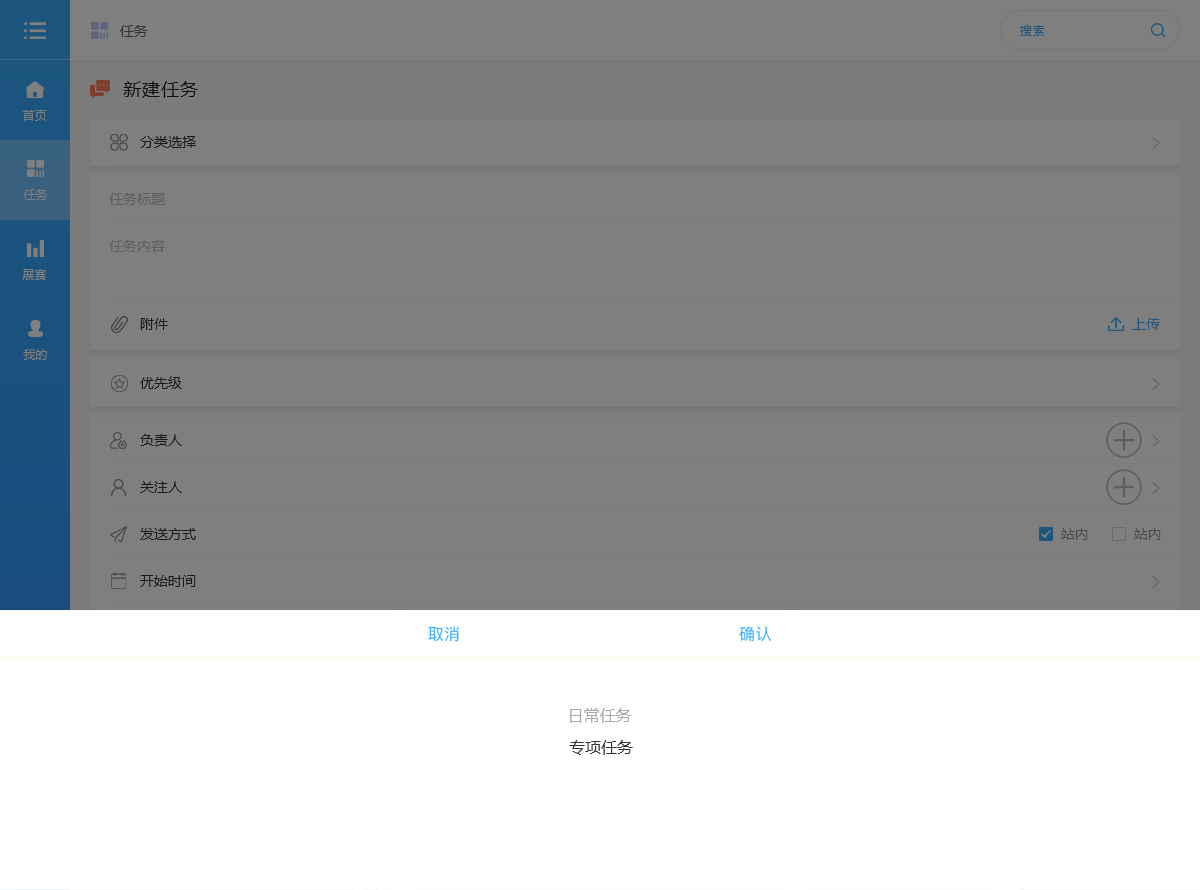
<style>
.page{position:relative;width:1200px;height:890px;background:#7f7f7f}
.page>*{position:absolute;margin:0}
.t1{font:14px "MicrosoftYaHei";color:#333333}
.t2{font:12px "MicrosoftYaHei";letter-spacing:0.05em;color:#1c567f}
.t3{font:18px "MicrosoftYaHei";letter-spacing:0.05em;color:#222222}
.t4{font:12px "MicrosoftYaHei";color:#7f7f7f}
.t5{font:14px "MicrosoftYaHei";color:#191919}
.t6{font:14px "MicrosoftYaHei";color:#5f5f5f}
.t7{font:14px "MicrosoftYaHei";color:#1c567f}
.t8{font:14px "MicrosoftYaHei";color:#4c4c4c}
.t9{font:16px "MicrosoftYaHei";color:#a8a8a8}
.t10{font:16px "MicrosoftYaHei";color:#333333}
</style>
<div class="page">
<p class="t1" style="left:120px;top:25px;width:28px;height:12px">任务</p>
<p class="t2" style="left:1020px;top:25px;width:25px;height:11px">搜索</p>
<p class="t3" style="left:123px;top:81px;width:75px;height:17px">新建任务</p>
<p class="t4" style="left:23px;top:110px;width:24px;height:11px">首页</p>
<p class="t5" style="left:140px;top:136px;width:56px;height:12px">分类选择</p>
<p class="t4" style="left:23px;top:189px;width:24px;height:11px">任务</p>
<p class="t6" style="left:109px;top:193px;width:56px;height:12px">任务标题</p>
<p class="t6" style="left:109px;top:240px;width:56px;height:12px">任务内容</p>
<p class="t4" style="left:22px;top:269px;width:24px;height:11px">展赛</p>
<p class="t5" style="left:140px;top:318px;width:28px;height:12px">附件</p>
<p class="t7" style="left:1132px;top:318px;width:28px;height:12px">上传</p>
<p class="t4" style="left:23px;top:349px;width:24px;height:11px">我的</p>
<p class="t5" style="left:140px;top:376px;width:42px;height:13px">优先级</p>
<p class="t5" style="left:140px;top:434px;width:42px;height:12px">负责人</p>
<p class="t5" style="left:140px;top:481px;width:42px;height:12px">关注人</p>
<p class="t5" style="left:140px;top:528px;width:56px;height:12px">发送方式</p>
<p class="t8" style="left:1061px;top:528px;width:27px;height:12px">站内</p>
<p class="t8" style="left:1134px;top:528px;width:27px;height:12px">站内</p>
<p class="t5" style="left:140px;top:575px;width:56px;height:12px">开始时间</p>
<p class="t9" style="left:570px;top:708px;width:62px;height:15px">日常任务</p>
<p class="t10" style="left:569px;top:740px;width:64px;height:15px">专项任务</p>
</div>
